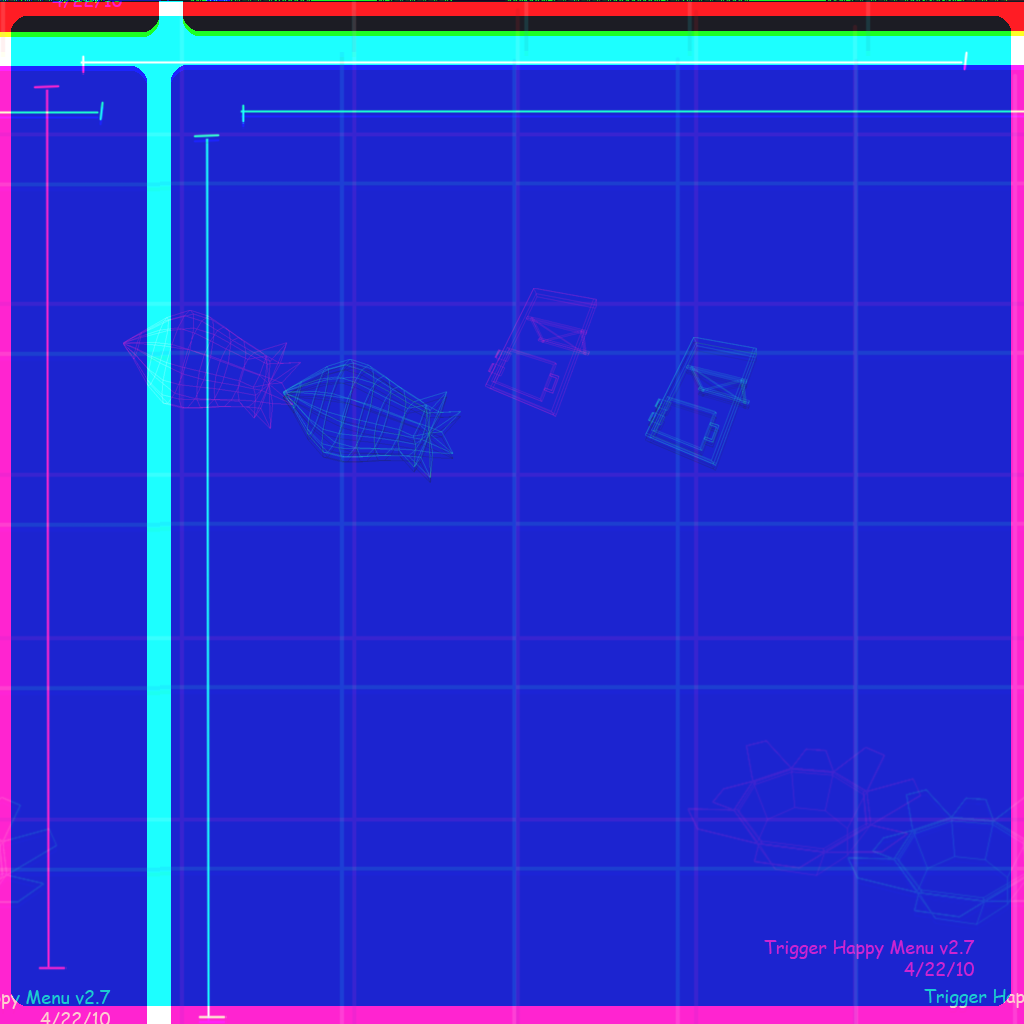
<style>
.page{position:relative;width:1024px;height:1024px;background:#1c24d0}
.page>*{position:absolute;margin:0}
.t1{font:18px "ComicSansMS"}
</style>
<div class="page">
<p class="t1" style="left:764px;top:938px;width:211px;height:37px;text-align:right">Trigger Happy Menu v2.7   <br>4/22/10</p>
</div>
